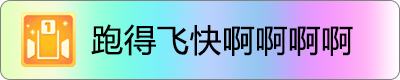
<style>
.page{position:relative;width:400px;height:80px}
.page>*{position:absolute;margin:0}
.t1{font:32px "MicrosoftYaHei";color:#000000;font-weight:bold}
</style>
<div class="page">
<p class="t1" style="left:91px;top:24px;width:262px;height:32px">跑得飞快啊啊啊啊</p>
</div>
